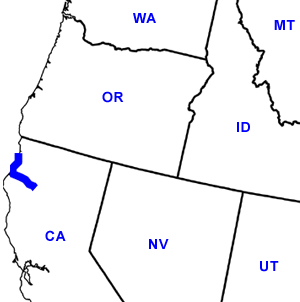
<style>
.page{position:relative;width:300px;height:302px;background:#ffffff}
.page>*{position:absolute;margin:0}
.t1{font:14px "Arial-BoldMT";letter-spacing:0.05em;color:#0000ff}
</style>
<div class="page">
<p class="t1" style="left:133px;top:13px;width:23px;height:10px">WA</p>
<p class="t1" style="left:274px;top:20px;width:21px;height:10px">MT</p>
<p class="t1" style="left:102px;top:91px;width:22px;height:12px">OR</p>
<p class="t1" style="left:237px;top:122px;width:13px;height:10px">ID</p>
<p class="t1" style="left:45px;top:230px;width:21px;height:11px">CA</p>
<p class="t1" style="left:149px;top:239px;width:20px;height:10px">NV</p>
<p class="t1" style="left:260px;top:261px;width:19px;height:11px">UT</p>
</div>
